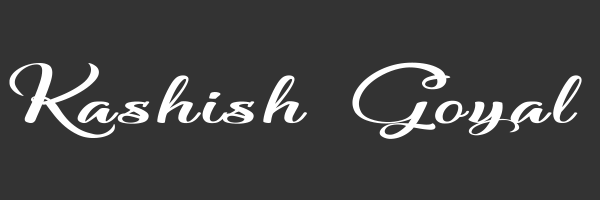
<style>
.page{position:relative;width:600px;height:200px;background:#333333}
.page>*{position:absolute;margin:0}
.t1{font:139.4px "Soulmaker-in-the-Mountains";letter-spacing:0.032em;color:#ffffff;scale:1.72 1}
</style>
<div class="page">
<p class="t1" style="left:9px;top:62px;width:573px;height:77px">Kashish Goyal</p>
</div>
